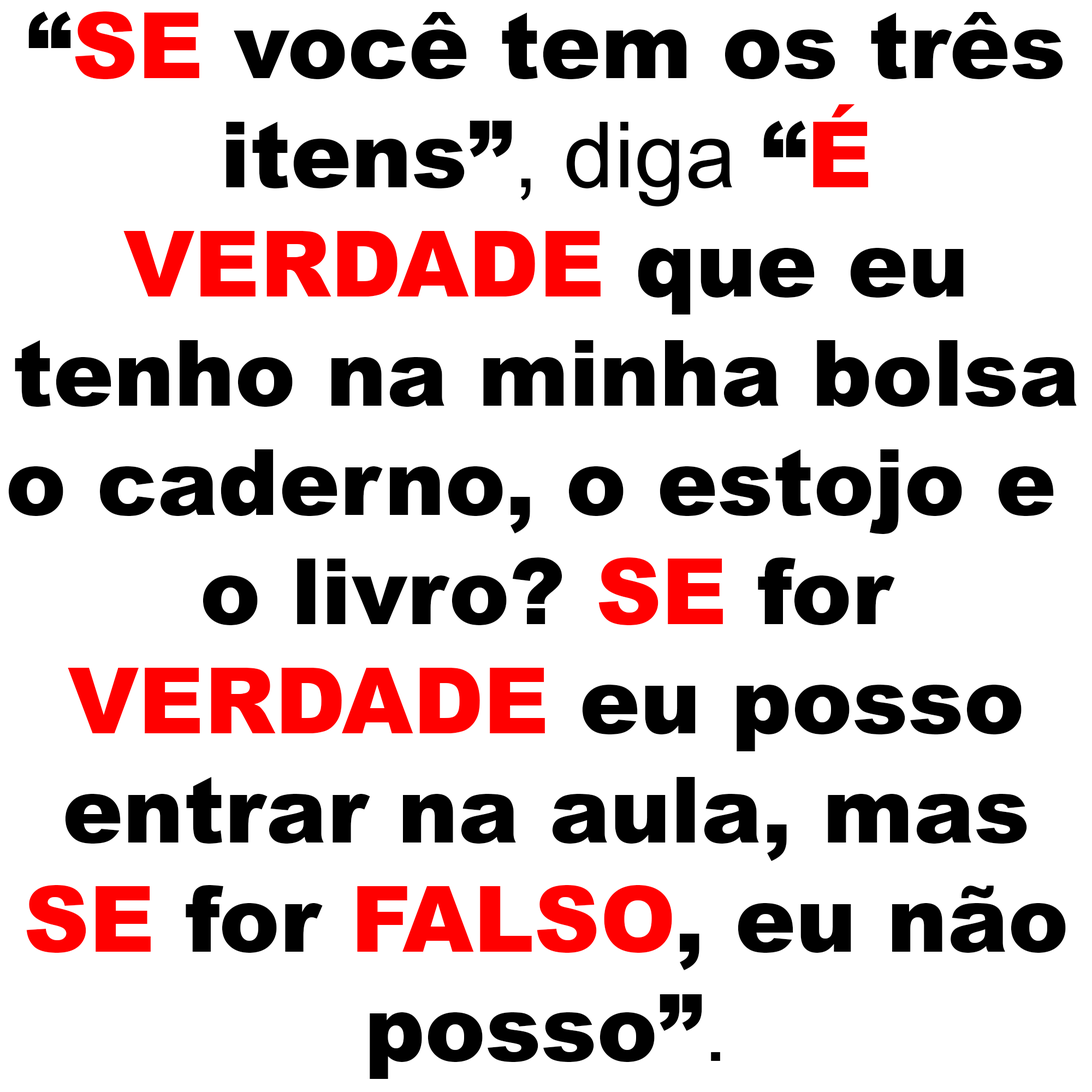
<style>
.page{position:relative;width:1092px;height:1092px;background:#ffffff}
.page>*{position:absolute;margin:0}
.t1{font:91px "Arial-Black";color:#000000}
.t2{font:91px "Arial-Black";color:#ff0000}
.t3{font:91px "ArialMT";color:#000000}
</style>
<div class="page">
<p class="t1" style="left:8px;top:11px;width:1069px;height:1068px;text-align:center">“<span class="t2">SE</span> você tem os três<br>itens”<span class="t3">, diga </span>“<span class="t2">É<br>VERDADE</span> que eu<br>tenho na minha bolsa<br>o caderno, o estojo e <br>o livro? <span class="t2">SE</span> for<br><span class="t2">VERDADE</span> eu posso<br>entrar na aula, mas<br><span class="t2">SE</span> for <span class="t2">FALSO</span>, eu não<br>posso”<span class="t3">.</span></p>
</div>
